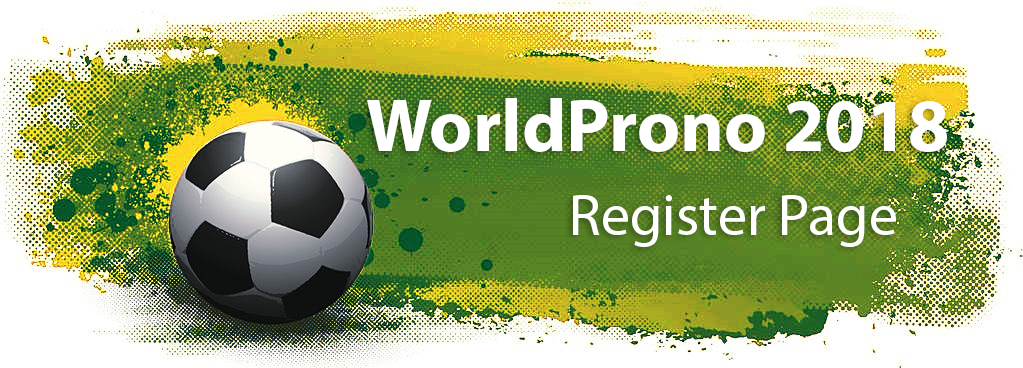
<style>
.page{position:relative;width:1023px;height:368px}
.page>*{position:absolute;margin:0}
.t1{font:75px "MyriadPro-Bold";color:#ffffff}
.t2{font:58.3px "MyriadPro-Regular";color:#ffffff}
</style>
<div class="page">
<p class="t1" style="left:367px;top:98px;width:580px;height:54px">WorldProno 2018</p>
<p class="t2" style="left:573px;top:195px;width:323px;height:52px">Register Page</p>
</div>
